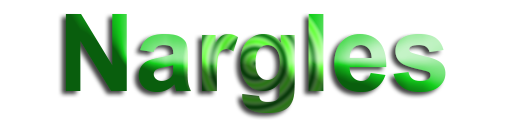
<style>
.page{position:relative;width:512px;height:128px;background:#ffffff}
.page>*{position:absolute;margin:0}
.t1{font:106.9px "Arial-BoldMT"}
</style>
<div class="page">
<p class="t1" style="left:65px;top:14px;width:381px;height:99px">Nargles</p>
</div>
